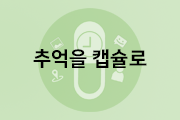
<style>
.page{position:relative;width:180px;height:120px}
.page>*{position:absolute;margin:0}
.t1{font:20px "NanumSquareOTFEB";color:#000000}
</style>
<div class="page">
<p class="t1" style="left:33px;top:49px;width:114px;height:19px">추억을 캡슐로</p>
</div>
